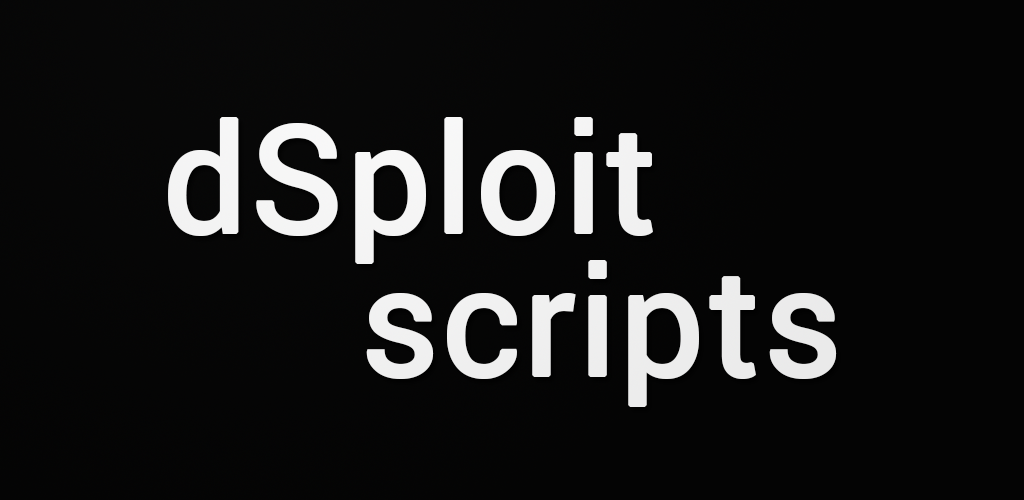
<style>
.page{position:relative;width:1024px;height:500px;background:#040404}
.page>*{position:absolute;margin:0}
.t1{font:148px "Roboto-Regular";color:#ffffff;font-weight:bold}
</style>
<div class="page">
<p class="t1" style="left:168px;top:117px;width:485px;height:147px">dSploit</p>
<p class="t1" style="left:366px;top:260px;width:471px;height:147px">scripts</p>
</div>
